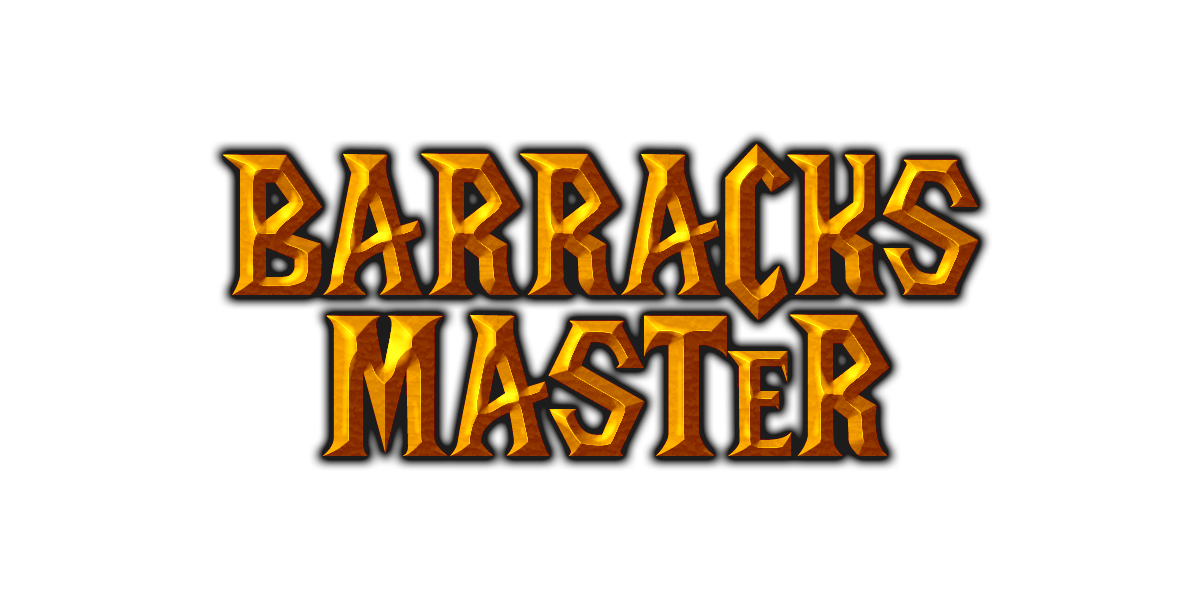
<style>
.page{position:relative;width:1200px;height:600px;background:#ffffff}
.page>*{position:absolute;margin:0}
.t1{font:200px "LifeCraft"}
.t2{font:150px "LifeCraft"}
</style>
<div class="page">
<p class="t1" style="left:223px;top:143px;width:756px;height:177px">BARRACKS</p>
<p class="t1" style="left:223px;top:143px;width:756px;height:177px">BARRACKS</p>
<p class="t1" style="left:223px;top:143px;width:756px;height:177px">BARRACKS</p>
<p class="t1" style="left:322px;top:314px;width:568px;height:142px">MAST<span class="t2">E</span>R</p>
<p class="t1" style="left:322px;top:314px;width:568px;height:142px">MAST<span class="t2">E</span>R</p>
<p class="t1" style="left:322px;top:314px;width:568px;height:142px">MAST<span class="t2">E</span>R</p>
</div>
